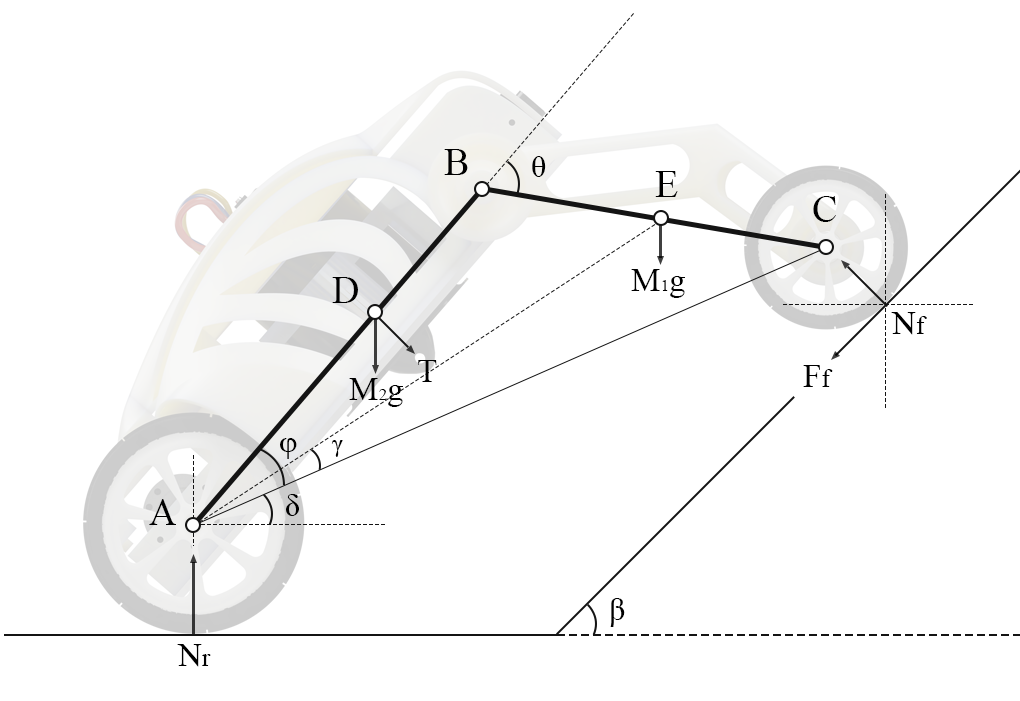
<style>
.page{position:relative;width:1020px;height:701px;background:#ffffff}
.page>*{position:absolute;margin:0}
.t1{font:37.5px "TimesNewRomanPSMT";color:#000000}
.t2{font:32px "TimesNewRomanPSMT";color:#000000}
.t3{font:33.3px "TimesNewRomanPSMT";color:#000000}
.t4{font:16.7px "TimesNewRomanPSMT";color:#000000}
.t5{font:25px "TimesNewRomanPSMT";color:#000000}
</style>
<div class="page">
<p class="t1" style="left:444px;top:149px;width:24px;height:26px">B</p>
<p class="t2" style="left:532px;top:156px;width:14px;height:21px">θ</p>
<p class="t1" style="left:655px;top:171px;width:23px;height:26px">E</p>
<p class="t1" style="left:813px;top:196px;width:23px;height:26px">C</p>
<p class="t3" style="left:631px;top:269px;width:54px;height:29px">M<span class="t4">1</span>g</p>
<p class="t1" style="left:332px;top:277px;width:26px;height:26px">D</p>
<p class="t3" style="left:891px;top:312px;width:36px;height:23px">N<span class="t5">f</span></p>
<p class="t3" style="left:418px;top:360px;width:19px;height:22px">T</p>
<p class="t3" style="left:803px;top:365px;width:30px;height:22px">F<span class="t5">f</span></p>
<p class="t3" style="left:349px;top:378px;width:54px;height:29px">M<span class="t4">2</span>g</p>
<p class="t2" style="left:280px;top:438px;width:17px;height:21px">φ</p>
<p class="t5" style="left:331px;top:440px;width:12px;height:17px">γ</p>
<p class="t2" style="left:286px;top:494px;width:13px;height:22px">δ</p>
<p class="t1" style="left:149px;top:499px;width:27px;height:26px">A</p>
<p class="t2" style="left:610px;top:598px;width:15px;height:29px">β</p>
<p class="t3" style="left:177px;top:644px;width:34px;height:23px">N<span class="t5">r</span></p>
</div>
